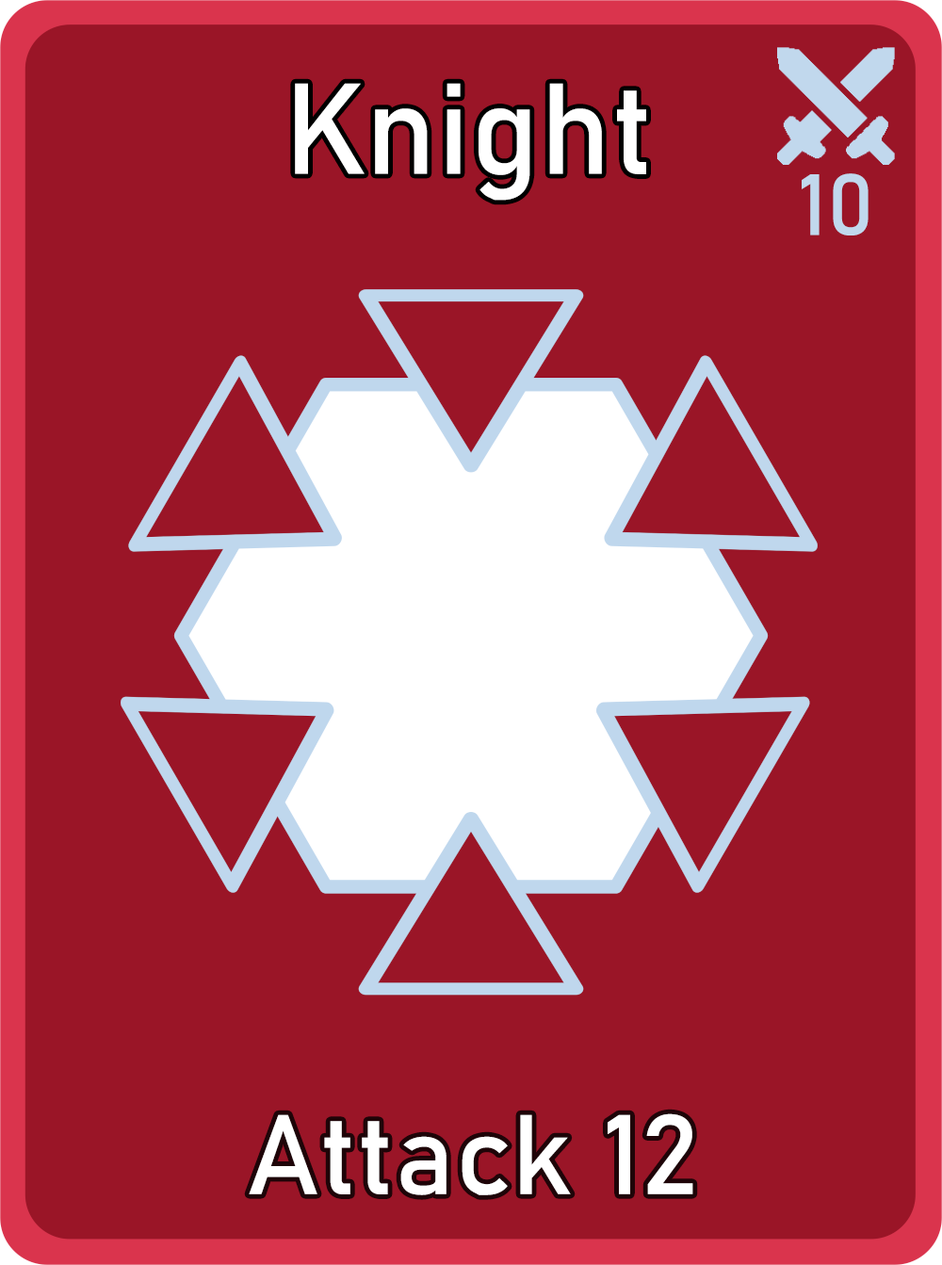
<style>
.page{position:relative;width:942px;height:1265px;background:#9a1527}
.page>*{position:absolute;margin:0}
.t1{font:126.7px "Bahnschrift";letter-spacing:0.01em;color:#ffffff}
.t2{font:85px "Bahnschrift";letter-spacing:0.01em;color:#c1d8ed}
.t3{font:111.3px "Bahnschrift";letter-spacing:0.01em;color:#ffffff}
</style>
<div class="page">
<p class="t1" style="left:295px;top:83px;width:351px;height:118px">Knight</p>
<p class="t2" style="left:802px;top:173px;width:67px;height:63px">10</p>
<p class="t3" style="left:249px;top:1114px;width:445px;height:82px">Attack 12</p>
</div>
